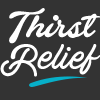
<style>
.page{position:relative;width:100px;height:100px;background:#333333}
.page>*{position:absolute;margin:0}
.t1{font:40px "BarleyScriptPERSONALUSE";color:#ffffff}
.t2{font:40px "ActoniaPERSONALUSE";color:#ffffff}
</style>
<div class="page">
<p class="t1" style="left:9px;top:8px;width:92px;height:36px">Thirst</p>
<p class="t2" style="left:0px;top:44px;width:101px;height:33px">Relief</p>
</div>
